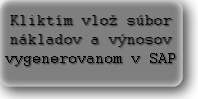
<style>
.page{position:relative;width:198px;height:99px;background:#7f7f7f}
.page>*{position:absolute;margin:0}
.t1{font:16px "Courier";color:#000000}
</style>
<div class="page">
<p class="t1" style="left:5px;top:15px;width:170px;height:51px;text-align:center">Kliktím vlož súbor nákladov a výnosov vygenerovanom v SAP</p>
</div>
